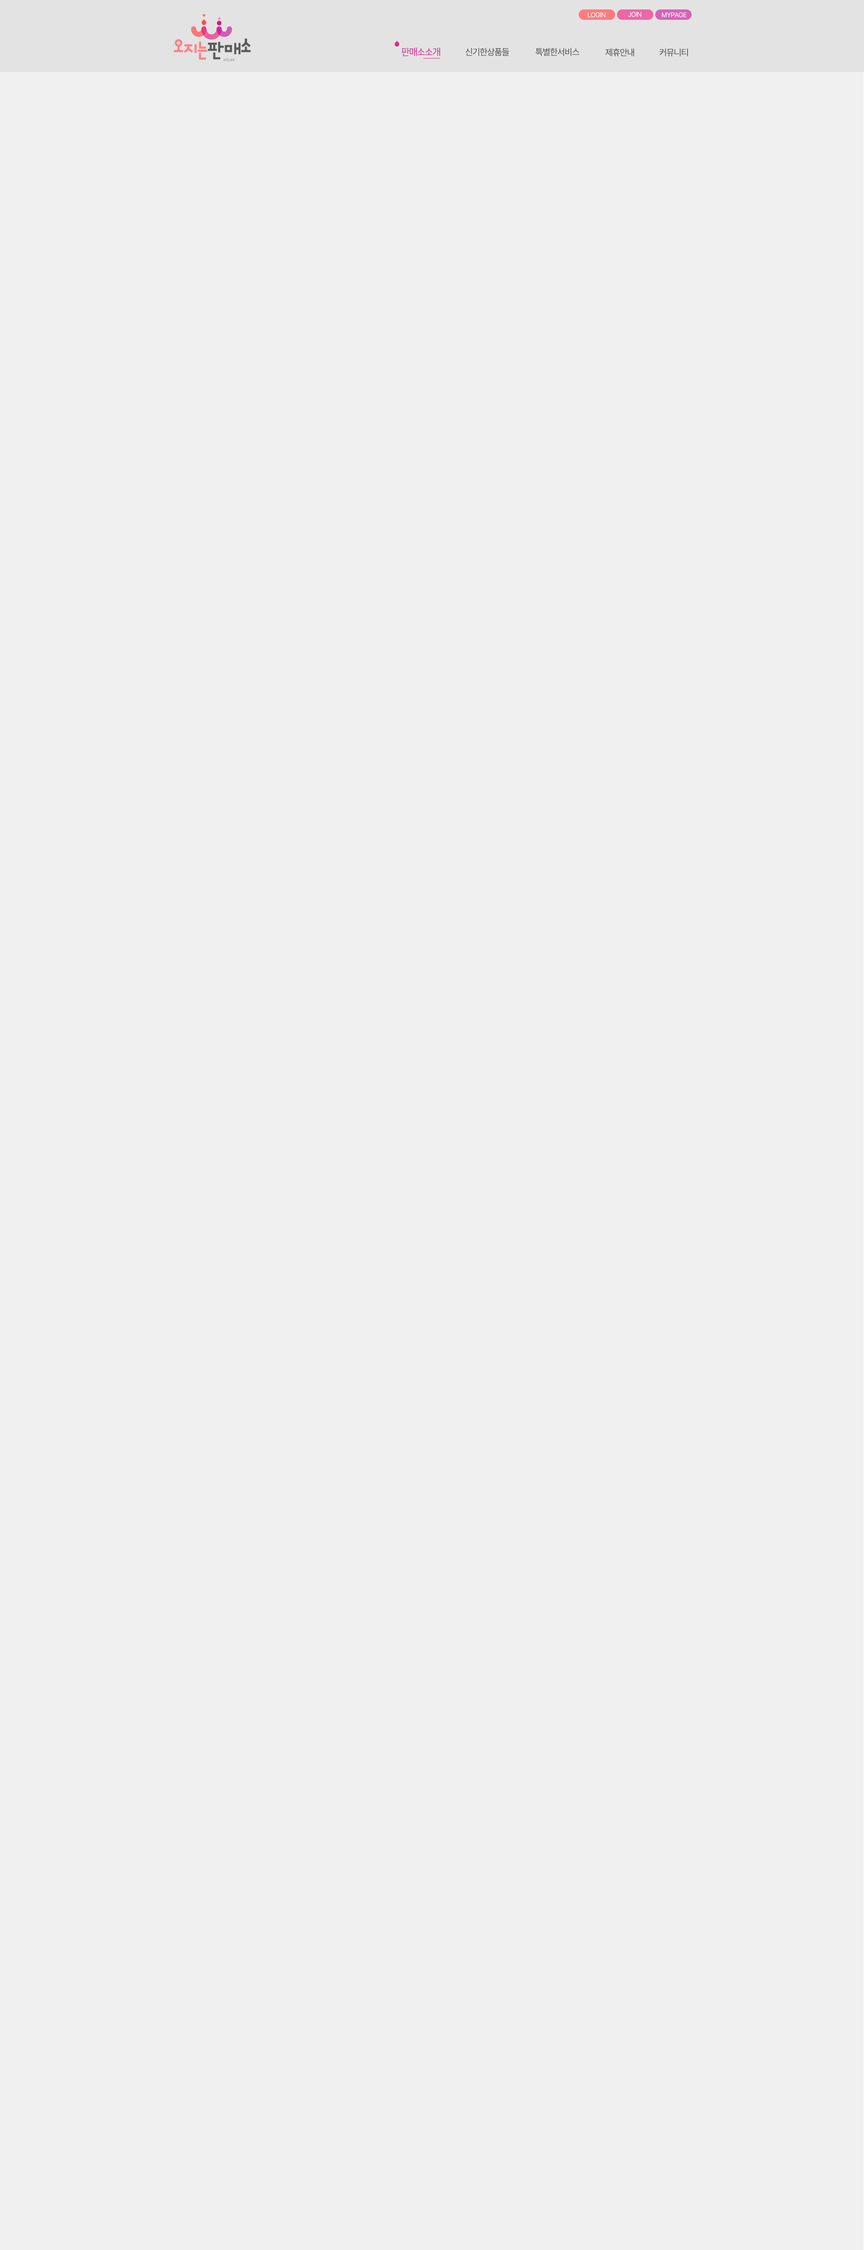
<style>
.page{position:relative;width:864px;height:2250px;background:#f0f0f0}
.page>*{position:absolute;margin:0}
.t1{font:6.8px "PretendardVariable-Regular";letter-spacing:-0.05em;color:#ffffff}
.t2{font:9px "GimpoGothicRegular";letter-spacing:-0.05em;color:#d42c9a}
.t3{font:9px "PretendardVariable-Regular";letter-spacing:-0.05em;color:#444444}
</style>
<div class="page">
<p class="t1" style="left:588px;top:12px;width:18px;height:6px">LOGIN</p>
<p class="t1" style="left:628px;top:12px;width:13px;height:5px">JOIN</p>
<p class="t1" style="left:662px;top:12px;width:25px;height:6px">MYPAGE</p>
<p class="t2" style="left:401px;top:48px;width:39px;height:8px">판매소소개</p>
<p class="t3" style="left:465px;top:48px;width:44px;height:8px">신기한상품들</p>
<p class="t3" style="left:536px;top:48px;width:44px;height:8px">특별한서비스</p>
<p class="t3" style="left:605px;top:48px;width:29px;height:8px">제휴안내</p>
<p class="t3" style="left:659px;top:48px;width:29px;height:9px">커뮤니티</p>
</div>
